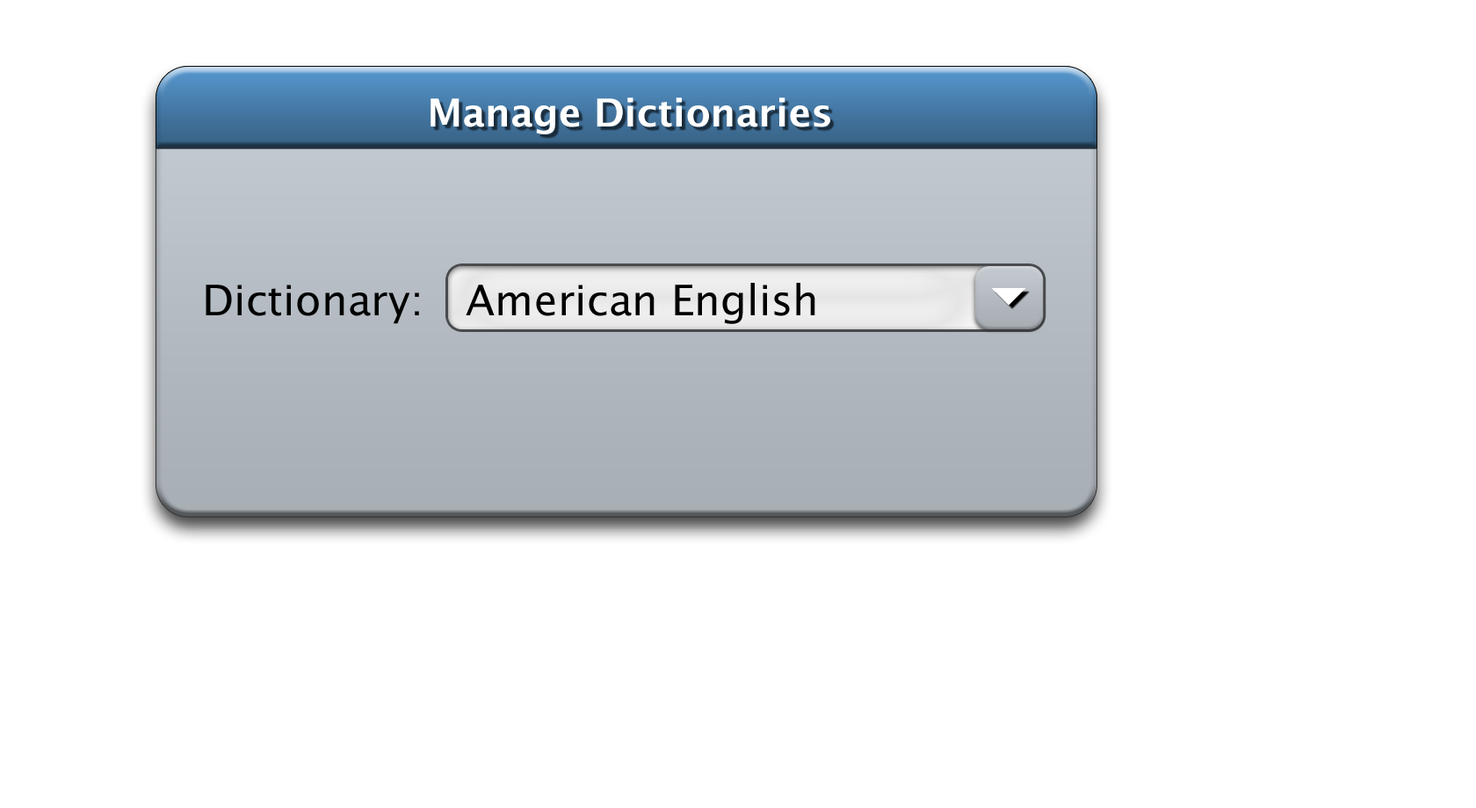
<style>
.page{position:relative;width:1476px;height:808px;background:#ffffff}
.page>*{position:absolute;margin:0}
.t1{font:38.6px "LucidaSans-Demi";color:#ffffff}
.t2{font:42.2px "LucidaSans";color:#000000}
</style>
<div class="page">
<p class="t1" style="left:430px;top:97px;width:400px;height:37px">Manage Dictionaries</p>
<p class="t2" style="left:206px;top:285px;width:213px;height:39px">Dictionary:</p>
<p class="t2" style="left:466px;top:283px;width:349px;height:41px">American English</p>
</div>
